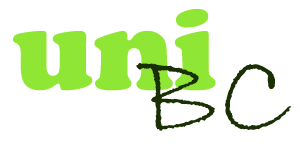
<style>
.page{position:relative;width:300px;height:150px;background:#ffffff}
.page>*{position:absolute;margin:0}
.t1{font:120px "CooperBlack";color:#90e634}
.t2{font:120px "BradleyHandITC";color:#1a2f04}
</style>
<div class="page">
<p class="t1" style="left:13px;top:9px;width:203px;height:82px">uni</p>
<p class="t2" style="left:136px;top:63px;width:156px;height:68px">BC</p>
</div>
